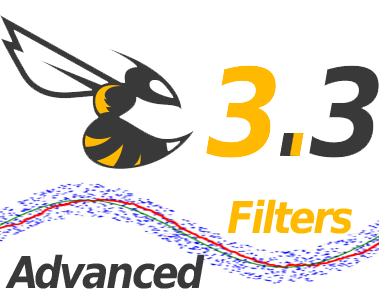
<style>
.page{position:relative;width:379px;height:300px;background:#ffffff}
.page>*{position:absolute;margin:0}
.t1{font:43.6px "DejaVuSansCondensed-BoldOblique";letter-spacing:-0.06em;color:#ffb900}
.t2{font:43.6px "DejaVuSansCondensed-BoldOblique";letter-spacing:-0.06em;color:#393939}
</style>
<div class="page">
<p class="t1" style="left:227px;top:199px;width:125px;height:35px">Filters</p>
<p class="t2" style="left:5px;top:254px;width:200px;height:35px">Advanced</p>
</div>
